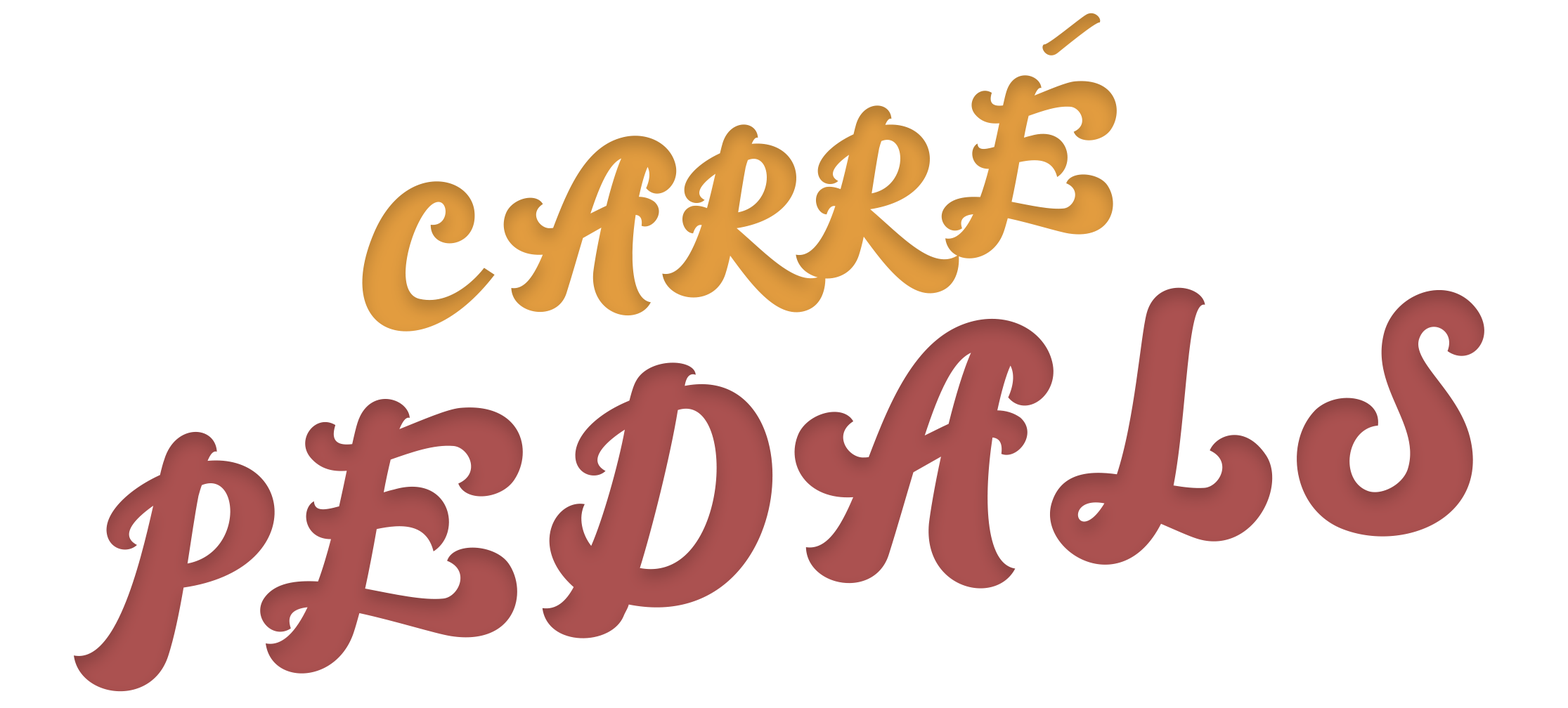
<style>
.page{position:relative;width:1568px;height:708px;background:#ffffff}
.page>*{position:absolute;margin:0}
.t1{font:118.8px "TheBrandy";letter-spacing:0.02em;color:#c58837;text-transform:uppercase}
.t2{font:179.6px "TheBrandy";letter-spacing:0.02em;color:#da973d;text-transform:uppercase}
.t3{font:269.4px "TheBrandy";letter-spacing:0.02em;color:#a9504f;text-transform:uppercase}
.t4{font:179.6px "TheBrandy";letter-spacing:0.02em;color:#a9504f;text-transform:uppercase}
</style>
<div class="page">
<p class="t1" style="left:1042px;top:13px;width:59px;height:43px;rotate:-35deg">-</p>
<p class="t2" style="left:362px;top:75px;width:755px;height:257px;rotate:-8deg">CarrE</p>
<p class="t3" style="left:74px;top:287px;width:1410px;height:405px;rotate:-8deg"><span class="t4"><br><br></span>pedals</p>
</div>
